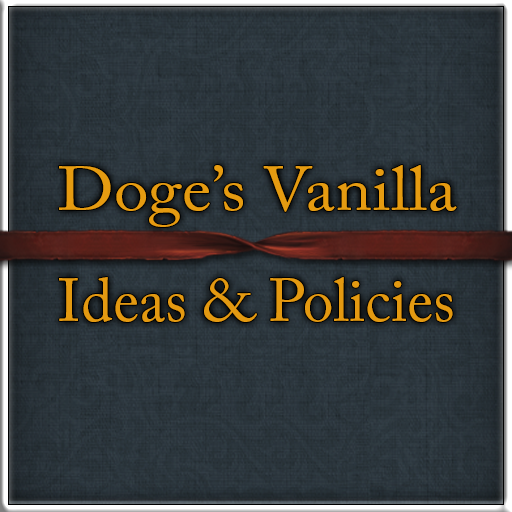
<style>
.page{position:relative;width:512px;height:512px}
.page>*{position:absolute;margin:0}
.t1{font:62.7px "ACaslonPro-Regular";color:#e59b11;scale:1.11 1}
.t2{font:61.3px "ACaslonPro-Regular";color:#e39911}
</style>
<div class="page">
<p class="t1" style="left:59px;top:165px;width:398px;height:62px">Doge’s Vanilla</p>
<p class="t2" style="left:59px;top:277px;width:394px;height:45px">Ideas &amp; Policies</p>
</div>
